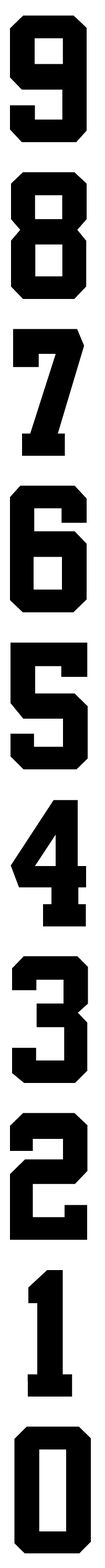
<style>
.page{position:relative;width:105px;height:1568px;background:#ffffff}
.page>*{position:absolute;margin:0}
.t1{font:156.8px "Athletic";color:#000000}
</style>
<div class="page">
<p class="t1" style="left:9px;top:15px;width:77px;height:127px">9</p>
<p class="t1" style="left:11px;top:172px;width:75px;height:127px">8</p>
<p class="t1" style="left:13px;top:329px;width:71px;height:127px">7</p>
<p class="t1" style="left:9px;top:486px;width:77px;height:127px">6</p>
<p class="t1" style="left:10px;top:642px;width:77px;height:127px">5</p>
<p class="t1" style="left:10px;top:800px;width:76px;height:127px">4</p>
<p class="t1" style="left:11px;top:956px;width:77px;height:127px">3</p>
<p class="t1" style="left:10px;top:1113px;width:77px;height:127px">2</p>
<p class="t1" style="left:27px;top:1270px;width:45px;height:127px">1</p>
<p class="t1" style="left:14px;top:1426px;width:76px;height:127px">0</p>
</div>
